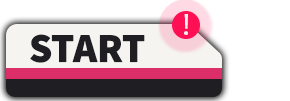
<style>
.page{position:relative;width:290px;height:101px;background:#ffffff}
.page>*{position:absolute;margin:0}
.t1{font:30.6px "MyriadPro-Regular";color:#f5f4f1;scale:1.14 1}
.t2{font:41.3px "SourceSans3Roman-Black";color:#1f1e23}
</style>
<div class="page">
<p class="t1" style="left:184px;top:14px;width:4px;height:21px">!</p>
<p class="t2" style="left:30px;top:34px;width:115px;height:29px">START</p>
</div>
